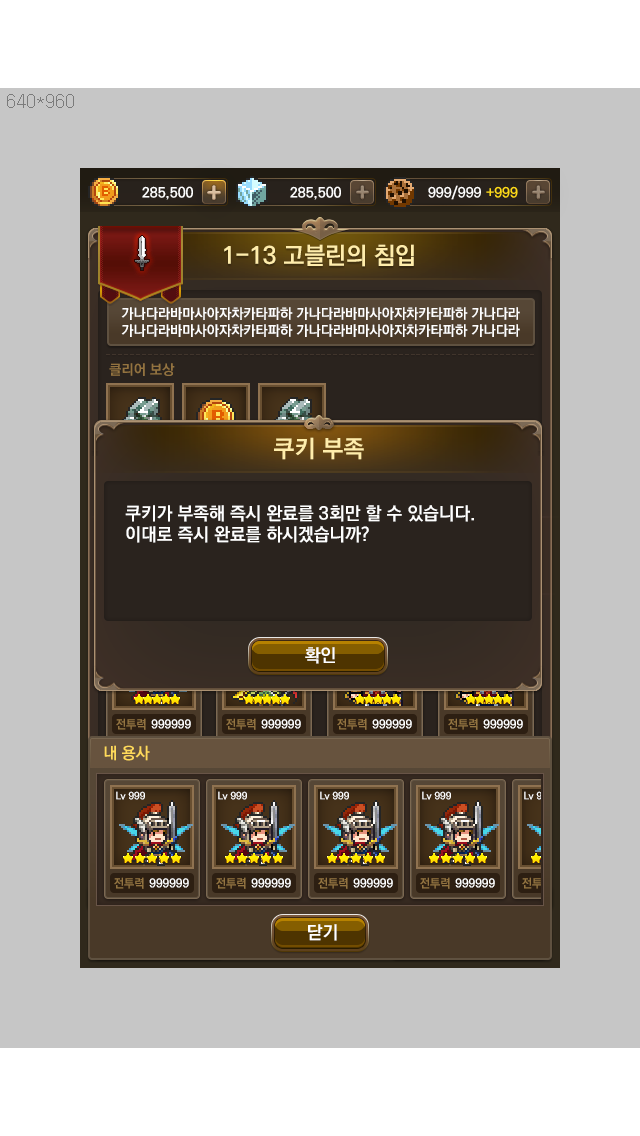
<style>
.page{position:relative;width:640px;height:1136px;background:#c6c6c6}
.page>*{position:absolute;margin:0}
.t1{font:24px "KoPubDotumBold";color:#ffedab}
.t2{font:14px "KoPubDotumBold";color:#ffffff}
.t3{font:14px "KoPubDotumBold";color:#937340}
.t4{font:18px "KoPubDotumBold";color:#ffffff}
.t5{font:12px "KoPubDotumBold";color:#937441}
.t6{font:12px "KoPubDotumBold";color:#ffffff}
.t7{font:16px "KoPubDotumBold";color:#ffda5b}
</style>
<div class="page">
<p class="t1" style="left:224px;top:244px;width:190px;height:23px">1-13 고블린의 침입</p>
<p class="t2" style="left:121px;top:307px;width:399px;height:30px">가나다라바마사아자차카타파하 가나다라바마사아자차카타파하 가나다라<br>가나다라바마사아자차카타파하 가나다라바마사아자차카타파하 가나다라</p>
<p class="t3" style="left:109px;top:363px;width:66px;height:13px">클리어 보상</p>
<p class="t1" style="left:274px;top:437px;width:90px;height:23px">쿠키 부족</p>
<p class="t4" style="left:125px;top:505px;width:349px;height:38px">쿠키가 부족해 즉시 완료를 3회만 할 수 있습니다. <br>이대로 즉시 완료를 하시겠습니까?</p>
<p class="t5" style="left:116px;top:718px;width:30px;height:12px">전투력</p>
<p class="t6" style="left:151px;top:719px;width:40px;height:10px">999999</p>
<p class="t5" style="left:226px;top:718px;width:30px;height:12px">전투력</p>
<p class="t6" style="left:261px;top:719px;width:40px;height:10px">999999</p>
<p class="t5" style="left:337px;top:718px;width:30px;height:12px">전투력</p>
<p class="t6" style="left:372px;top:719px;width:40px;height:10px">999999</p>
<p class="t5" style="left:448px;top:718px;width:30px;height:12px">전투력</p>
<p class="t6" style="left:483px;top:719px;width:40px;height:10px">999999</p>
<p class="t7" style="left:104px;top:745px;width:46px;height:16px">내 용사</p>
<p class="t4" style="left:308px;top:924px;width:29px;height:17px">닫기</p>
</div>
